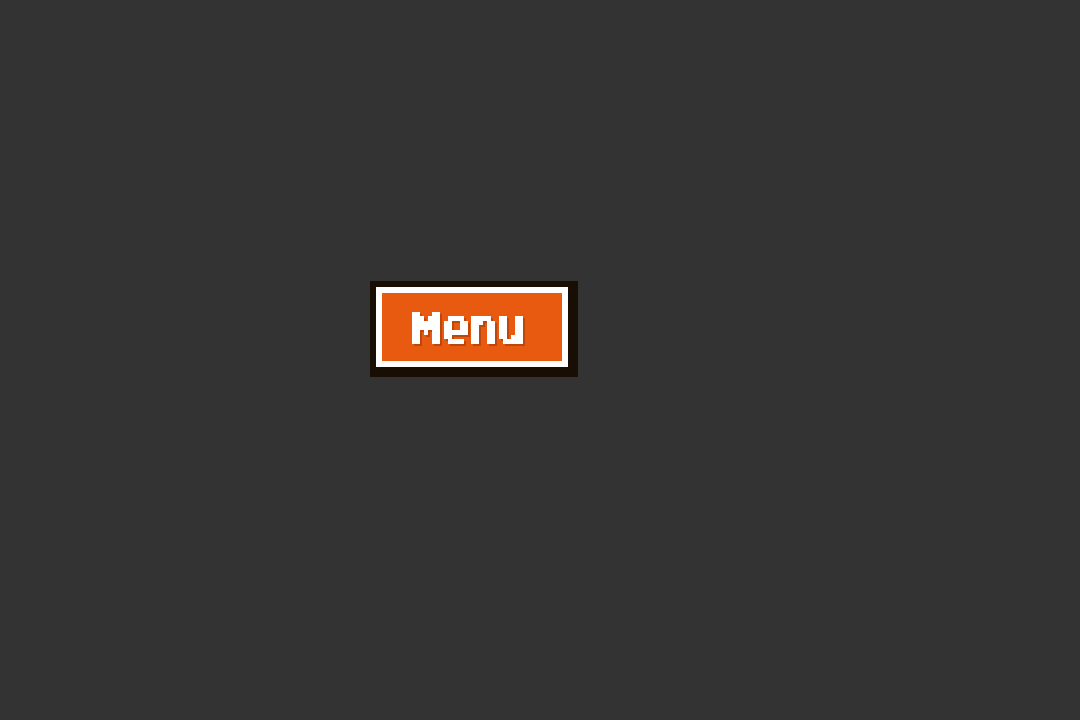
<style>
.page{position:relative;width:1080px;height:720px;background:#333333}
.page>*{position:absolute;margin:0}
.t1{font:46.2px "Arcadepix";color:#ffffff;scale:0.85 1}
</style>
<div class="page">
<p class="t1" style="left:412px;top:312px;width:111px;height:32px">Menu</p>
</div>
